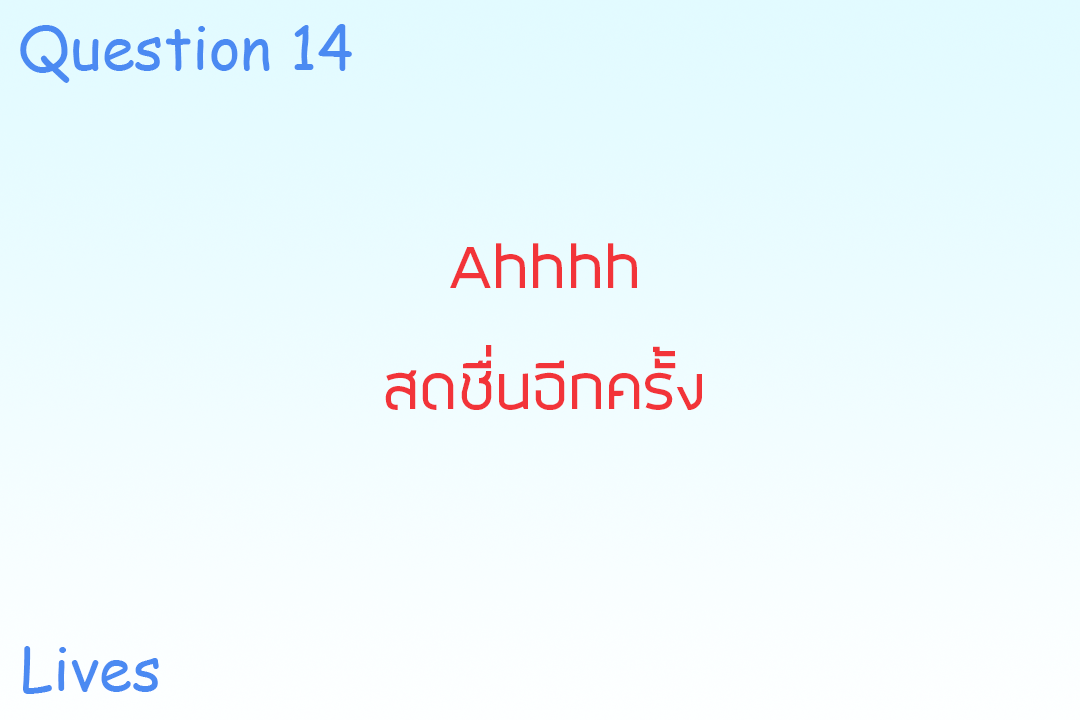
<style>
.page{position:relative;width:1080px;height:720px}
.page>*{position:absolute;margin:0}
.t1{font:60px "ComicSansMS";color:#4b8af2}
.t2{font:72px "SuperspaceRegular";color:#f23439}
.t3{font:59.6px "ComicSansMS";color:#4b8af2}
</style>
<div class="page">
<p class="t1" style="left:20px;top:24px;width:332px;height:59px">Question 14</p>
<p class="t2" style="left:450px;top:243px;width:187px;height:45px">Ahhhh</p>
<p class="t2" style="left:385px;top:345px;width:317px;height:65px">สดชื่นอีกครั้ง</p>
<p class="t3" style="left:23px;top:646px;width:136px;height:48px">Lives</p>
</div>
